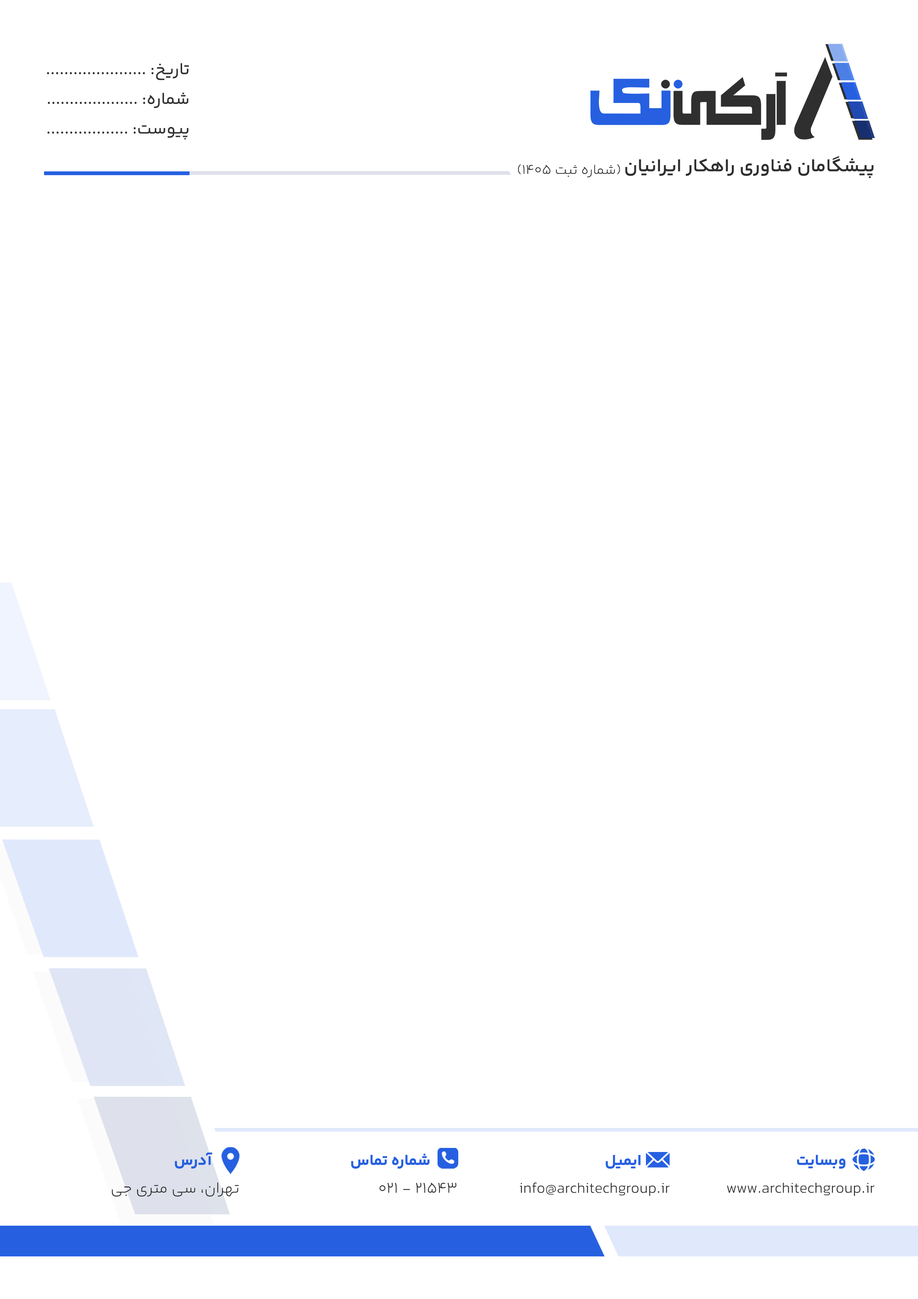
<style>
.page{position:relative;width:918px;height:1299px;background:#ffffff}
.page>*{position:absolute;margin:0}
.t1{font:17px "YekanBakhFaNum-Regular";color:#2f2f2f}
.t2{font:18.5px "YekanBakhFaNum-SemiBold";color:#2f2f2f}
.t3{font:13.9px "YekanBakhFaNum-Light";color:#2f2f2f}
.t4{font:15.4px "YekanBakhFaNum-Bold";color:#2660e1}
.t5{font:15.4px "YekanBakhFaNum-Light";color:#2f2f2f}
</style>
<div class="page">
<p class="t1" style="left:47px;top:63px;width:142px;height:77px">تاریخ: ......................<br>شماره: ....................<br>پیوست: ..................</p>
<p class="t2" style="left:625px;top:156px;width:249px;height:22px">پیشگامان فناوری راهکار ایرانیان</p>
<p class="t3" style="left:518px;top:164px;width:102px;height:13px">(شماره ثبت 1405)</p>
<p class="t4" style="left:175px;top:1152px;width:38px;height:16px">آدرس</p>
<p class="t4" style="left:351px;top:1153px;width:79px;height:15px">شماره تماس</p>
<p class="t4" style="left:606px;top:1155px;width:35px;height:13px">ایمیل</p>
<p class="t4" style="left:797px;top:1154px;width:49px;height:14px">وبسایت</p>
<p class="t5" style="left:112px;top:1182px;width:127px;height:15px">تهران، سی متری جی</p>
<p class="t5" style="left:379px;top:1182px;width:77px;height:10px">021 - 21543</p>
<p class="t5" style="left:520px;top:1182px;width:150px;height:14px">info@architechgroup.ir</p>
<p class="t5" style="left:727px;top:1182px;width:147px;height:14px">www.architechgroup.ir</p>
</div>
